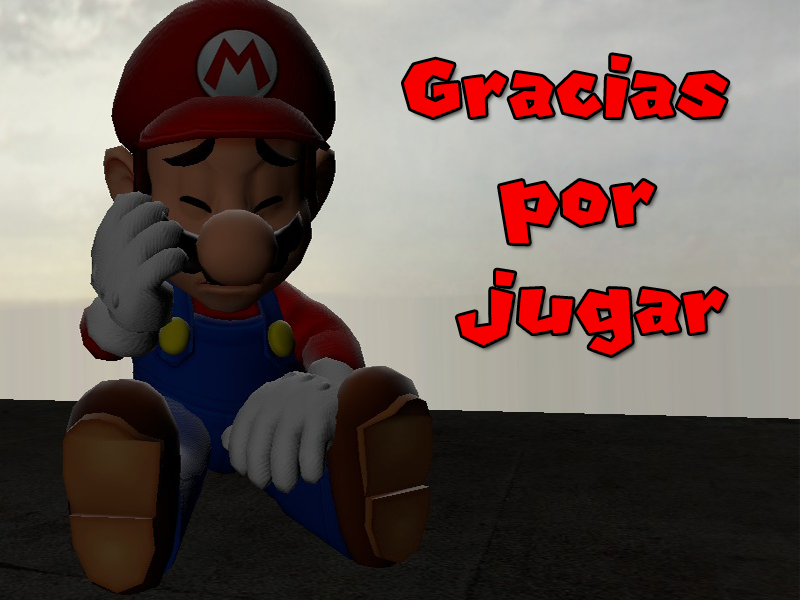
<style>
.page{position:relative;width:800px;height:600px}
.page>*{position:absolute;margin:0}
.t1{font:90px "NewSuperMarioFontU";color:#f80000}
</style>
<div class="page">
<p class="t1" style="left:404px;top:55px;width:324px;height:300px;text-align:center">Gracias <br>por<br> jugar</p>
</div>
